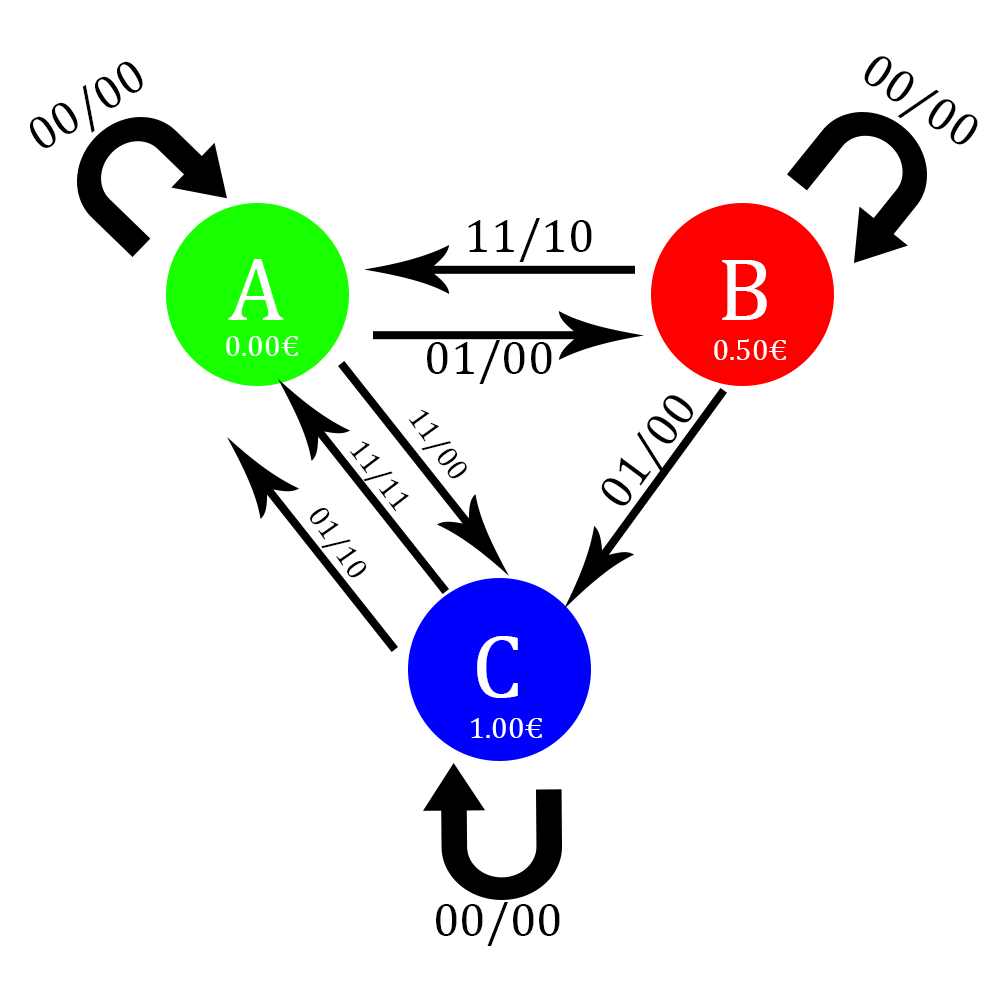
<style>
.page{position:relative;width:1000px;height:1000px;background:#ffffff}
.page>*{position:absolute;margin:0}
.t1{font:48px "CambriaMath";color:#000000}
.t2{font:90px "CambriaMath";color:#ffffff}
.t3{font:30px "CambriaMath";color:#ffffff}
.t4{font:30px "CambriaMath";color:#000000}
</style>
<div class="page">
<p class="t1" style="left:30px;top:61px;width:113px;height:87px;rotate:-32deg">00/00</p>
<p class="t1" style="left:864px;top:56px;width:114px;height:89px;rotate:34deg">00/00</p>
<p class="t1" style="left:468px;top:218px;width:124px;height:44px">11/10</p>
<p class="t2" style="left:228px;top:259px;width:56px;height:61px">A</p>
<p class="t2" style="left:722px;top:260px;width:45px;height:60px">B</p>
<p class="t3" style="left:226px;top:336px;width:72px;height:20px">0.00€</p>
<p class="t1" style="left:427px;top:340px;width:125px;height:44px">01/00</p>
<p class="t3" style="left:714px;top:339px;width:72px;height:21px">0.50€</p>
<p class="t1" style="left:601px;top:395px;width:92px;height:111px;rotate:-54deg">01/00</p>
<p class="t4" style="left:408px;top:409px;width:59px;height:70px;rotate:54deg">11/00</p>
<p class="t4" style="left:350px;top:441px;width:59px;height:71px;rotate:53deg">11/11</p>
<p class="t4" style="left:310px;top:508px;width:57px;height:70px;rotate:55deg">01/10</p>
<p class="t2" style="left:477px;top:636px;width:41px;height:62px">C</p>
<p class="t3" style="left:471px;top:718px;width:71px;height:20px">1.00€</p>
<p class="t1" style="left:436px;top:902px;width:124px;height:44px">00/00</p>
</div>
